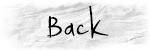
<style>
.page{position:relative;width:150px;height:50px}
.page>*{position:absolute;margin:0}
.t1{font:48px "SmallTownSkyline";letter-spacing:0.03em;color:#000000}
</style>
<div class="page">
<p class="t1" style="left:47px;top:6px;width:62px;height:33px">Back</p>
</div>
